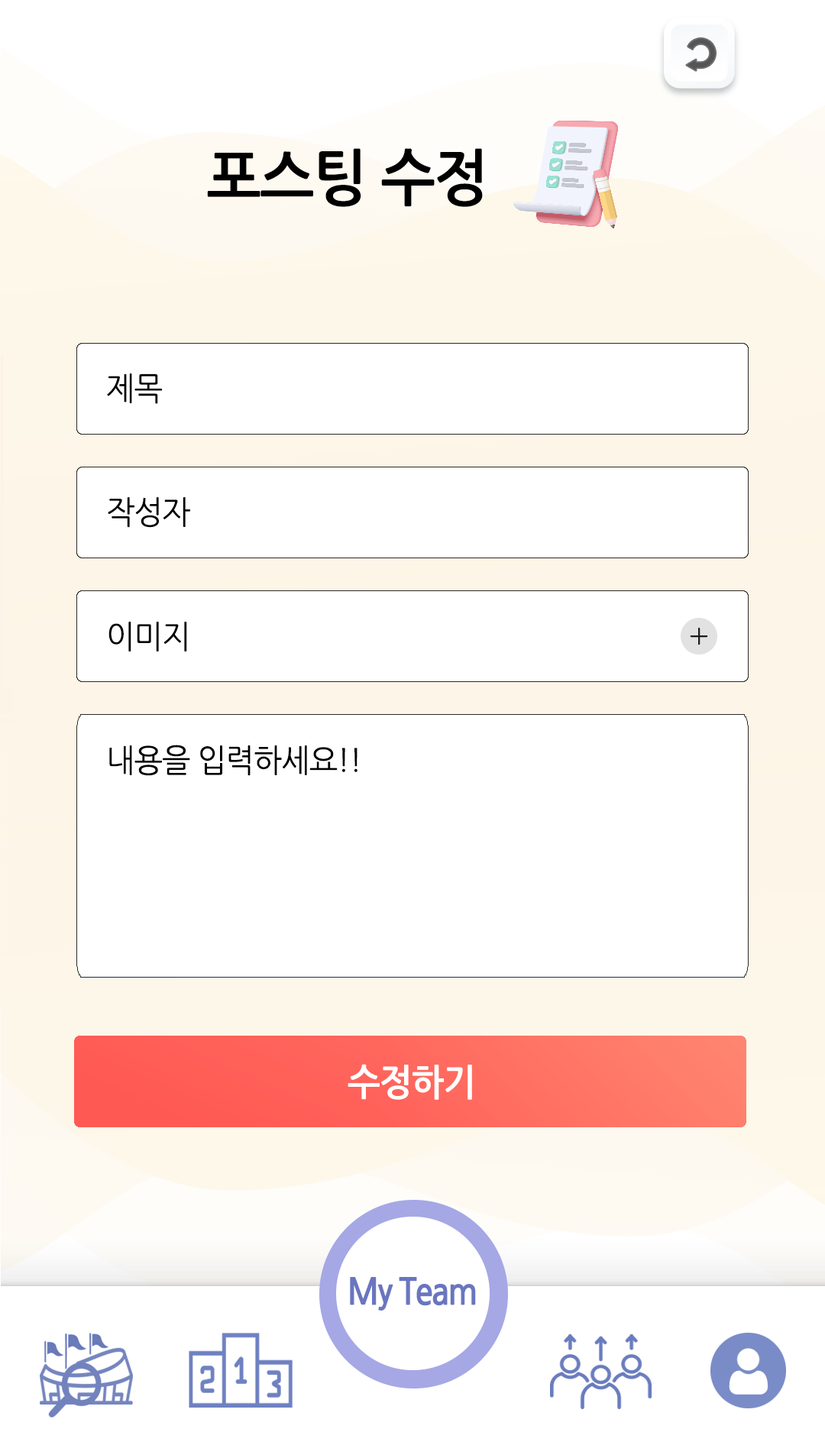
<style>
.page{position:relative;width:825px;height:1445px;background:#ffffff}
.page>*{position:absolute;margin:0}
.t1{font:61.1px "NanumGothicBold";letter-spacing:-0.025em;color:#000000;scale:0.95 1}
.t2{font:32.1px "NanumGothic";letter-spacing:-0.025em;color:#000000;scale:0.95 1}
.t3{font:36.7px "NanumGothicBold";letter-spacing:-0.025em;color:#ffffff;scale:0.95 1}
</style>
<div class="page">
<p class="t1" style="left:207px;top:148px;width:276px;height:59px">포스팅 수정</p>
<p class="t2" style="left:107px;top:374px;width:55px;height:30px">제목</p>
<p class="t2" style="left:108px;top:497px;width:82px;height:31px">작성자</p>
<p class="t2" style="left:108px;top:622px;width:79px;height:30px">이미지</p>
<p class="t2" style="left:109px;top:745px;width:249px;height:31px">내용을 입력하세요!!</p>
<p class="t3" style="left:348px;top:1064px;width:124px;height:36px">수정하기</p>
</div>
